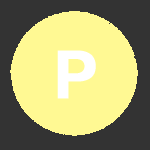
<style>
.page{position:relative;width:150px;height:150px;background:#fff993}
.page>*{position:absolute;margin:0}
.t1{font:55.8px "FZLTTHB--B51-0";color:#ffffff}
</style>
<div class="page">
<p class="t1" style="left:57px;top:50px;width:39px;height:49px">P</p>
</div>
